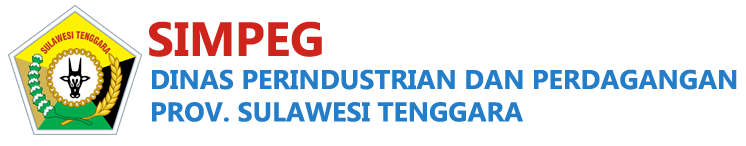
<style>
.page{position:relative;width:746px;height:146px;background:#ffffff}
.page>*{position:absolute;margin:0}
.t1{font:48px "Gadugi-Bold";color:#cf241c}
.t2{font:27px "Gadugi-Bold";color:#237dc9}
</style>
<div class="page">
<p class="t1" style="left:149px;top:21px;width:173px;height:36px">SIMPEG</p>
<p class="t2" style="left:152px;top:69px;width:585px;height:53px">DINAS PERINDUSTRIAN DAN PERDAGANGAN<br>PROV. SULAWESI TENGGARA</p>
</div>
